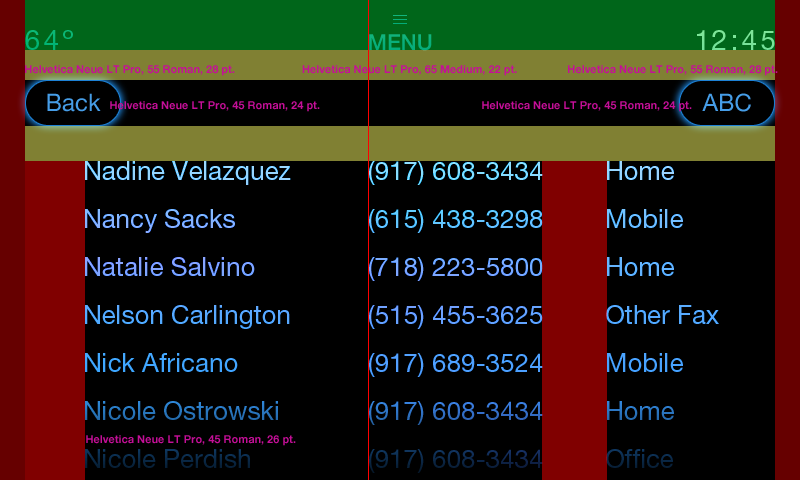
<style>
.page{position:relative;width:800px;height:480px;background:#000000}
.page>*{position:absolute;margin:0}
.t1{font:28px "HelveticaNeueLTStd-Roman";letter-spacing:0.12em;color:#05b575}
.t2{font:28px "HelveticaNeueLTStd-Roman";letter-spacing:0.12em;color:#7ae399}
.t3{font:28px "HelveticaNeueLTStd-Roman";letter-spacing:0.05em;color:#7ae399}
.t4{font:22px "HelveticaNeueLTStd-Md";color:#09af7b;text-transform:uppercase}
.t5{font:11px "HelveticaNeueLTPro-Bd";color:#c50f98}
.t6{font:24px "HelveticaNeue";color:#469de7}
.t7{font:26px/48px "HelveticaNeueLTStd-Roman"}
</style>
<div class="page">
<p class="t1" style="left:25px;top:30px;width:48px;height:20px">64º</p>
<p class="t2" style="left:697px;top:30px;width:78px;height:20px"><span class="t3">1</span>2:45</p>
<p class="t4" style="left:369px;top:34px;width:63px;height:17px">Menu</p>
<p class="t5" style="left:25px;top:65px;width:210px;height:11px">Helvetica Neue LT Pro, 55 Roman, 28 pt.</p>
<p class="t5" style="left:302px;top:65px;width:215px;height:11px">Helvetica Neue LT Pro, 65 Medium, 22 pt.</p>
<p class="t5" style="left:568px;top:65px;width:210px;height:11px">Helvetica Neue LT Pro, 55 Roman, 28 pt.</p>
<p class="t6" style="left:47px;top:93px;width:54px;height:19px">Back</p>
<p class="t5" style="left:110px;top:101px;width:210px;height:11px">Helvetica Neue LT Pro, 45 Roman, 24 pt.</p>
<p class="t5" style="left:482px;top:101px;width:210px;height:11px">Helvetica Neue LT Pro, 45 Roman, 24 pt.</p>
<p class="t6" style="left:702px;top:93px;width:49px;height:19px">ABC</p>
<p class="t7" style="left:85px;top:161px;width:206px;height:307px">Nadine Velazquez<br>Nancy Sacks<br>Natalie Salvino<br>Nelson Carlington<br>Nick Africano<br>Nicole Ostrowski<br>Nicole Perdish<br>Nola Strauss</p>
<p class="t7" style="left:369px;top:161px;width:174px;height:312px">(917) 608-3434<br>(615) 438-3298<br>(718) 223-5800<br>(515) 455-3625<br>(917) 689-3524<br>(917) 608-3434<br>(917) 608-3434<br>(646) 543-4980</p>
<p class="t7" style="left:606px;top:161px;width:113px;height:307px">Home<br>Mobile<br>Home<br>Other Fax<br>Mobile<br>Home<br>Office<br>Work</p>
<p class="t5" style="left:86px;top:435px;width:210px;height:11px">Helvetica Neue LT Pro, 45 Roman, 26 pt.</p>
</div>
